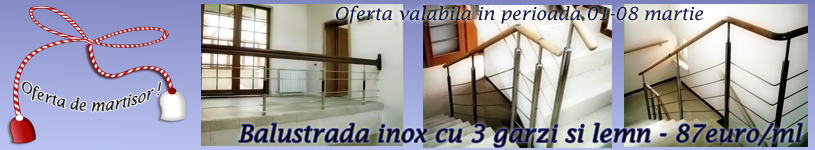
<style>
.page{position:relative;width:815px;height:150px}
.page>*{position:absolute;margin:0}
.t1{font:18px "LucidaFax-Italic";color:#161c47}
.t2{font:24px "LucidaFax-Italic";color:#160c0c}
</style>
<div class="page">
<p class="t1" style="left:336px;top:5px;width:367px;height:19px">Oferta valabila in perioada 01-08 martie</p>
<p class="t2" style="left:239px;top:123px;width:564px;height:24px">Balustrada inox cu 3 garzi si lemn - 87euro/ml</p>
</div>
